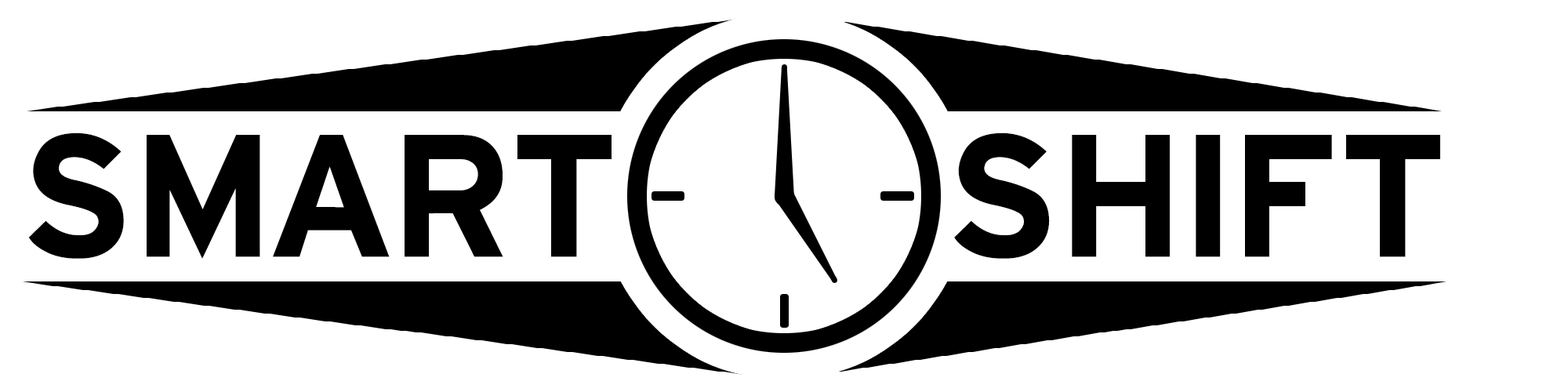
<style>
.page{position:relative;width:1568px;height:392px;background:#ffffff}
.page>*{position:absolute;margin:0}
.t1{font:184.2px "HittheRoad";color:#000000}
</style>
<div class="page">
<p class="t1" style="left:28px;top:132px;width:584px;height:127px">SMART</p>
<p class="t1" style="left:954px;top:132px;width:486px;height:127px">SHIFT</p>
</div>
